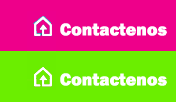
<style>
.page{position:relative;width:176px;height:102px;background:#6bee00}
.page>*{position:absolute;margin:0}
.t1{font:18px "FranklinGothic-Heavy";color:#ffffff}
</style>
<div class="page">
<p class="t1" style="left:60px;top:23px;width:107px;height:13px">Contactenos</p>
<p class="t1" style="left:60px;top:73px;width:107px;height:13px">Contactenos</p>
</div>
